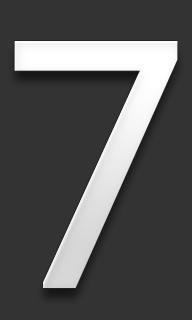
<style>
.page{position:relative;width:192px;height:320px;background:#333333}
.page>*{position:absolute;margin:0}
.t1{font:344.1px "Prelude-Medium";color:#ffffff}
</style>
<div class="page">
<p class="t1" style="left:14px;top:41px;width:164px;height:247px">7</p>
<p class="t1" style="left:14px;top:41px;width:164px;height:247px">7</p>
</div>
